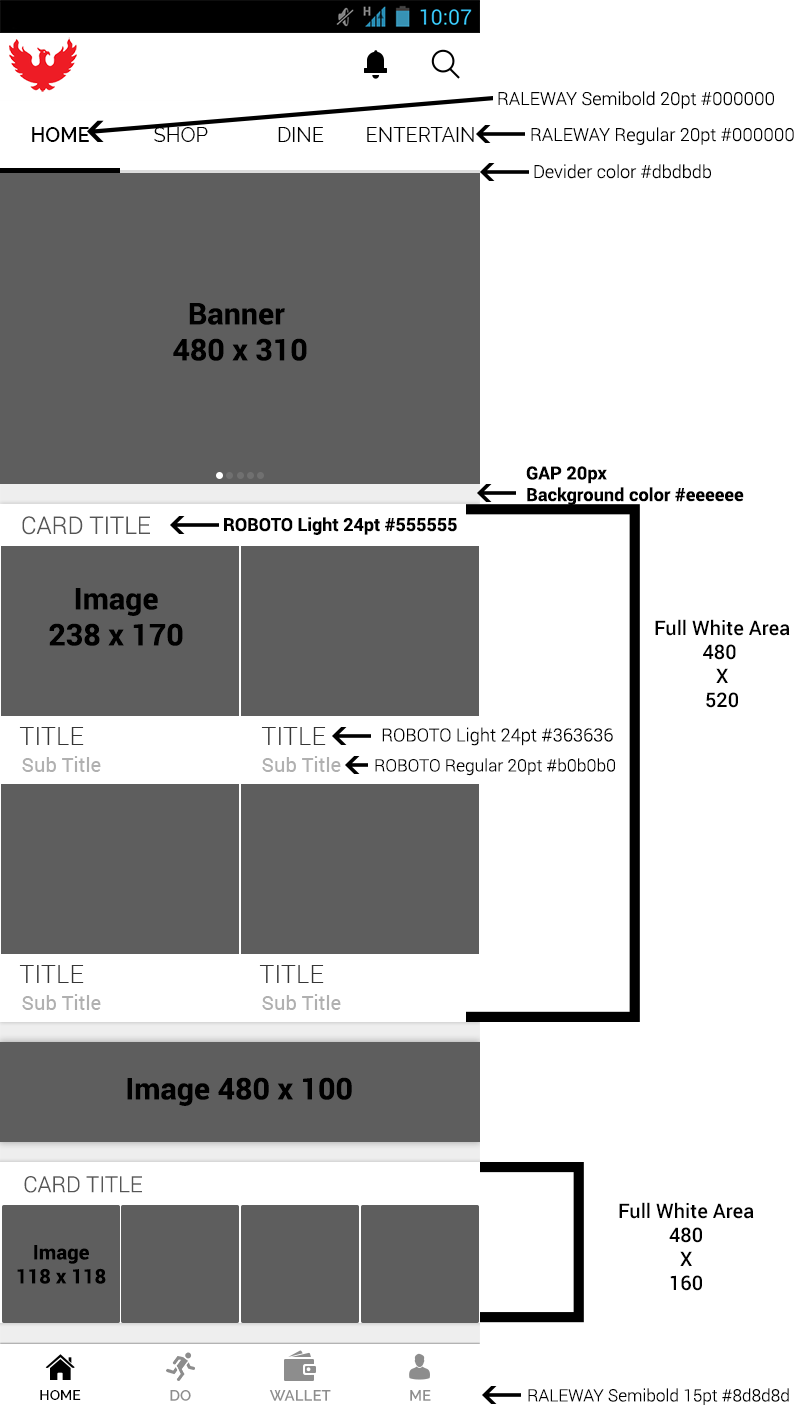
<style>
.page{position:relative;width:800px;height:1408px;background:#ffffff}
.page>*{position:absolute;margin:0}
.t1{font:18px "Roboto-Light";color:#000000}
.t2{font:20px "Raleway-SemiBold";color:#000000}
.t3{font:20px "Raleway";color:#000000}
.t4{font:30px "Roboto-Bold";color:#000000}
.t5{font:18px "Roboto-Bold";color:#000000}
.t6{font:24.2px "Roboto-Light";color:#555555}
.t7{font:20px "Roboto-Medium";color:#000000}
.t8{font:25.3px "Roboto-Light";color:#363636}
.t9{font:20px "Roboto-Regular";color:#b0b0b0}
.t10{font:17px "Roboto-Light";color:#000000}
.t11{font:22.2px "Roboto-Light";color:#555555}
.t12{font:20px "Roboto-Bold";color:#000000}
.t13{font:14px "Raleway-SemiBold";color:#000000}
.t14{font:15px "Raleway-SemiBold";color:#8d8d8d}
</style>
<div class="page">
<p class="t1" style="left:498px;top:91px;width:276px;height:18px">RALEWAY Semibold 20pt #000000</p>
<p class="t2" style="left:32px;top:127px;width:57px;height:15px">HOME</p>
<p class="t3" style="left:154px;top:127px;width:54px;height:15px">SHOP</p>
<p class="t3" style="left:278px;top:127px;width:46px;height:15px">DINE</p>
<p class="t3" style="left:367px;top:127px;width:107px;height:15px">ENTERTAIN</p>
<p class="t1" style="left:531px;top:127px;width:263px;height:18px">RALEWAY Regular 20pt #000000</p>
<p class="t1" style="left:534px;top:164px;width:177px;height:15px">Devider color #dbdbdb</p>
<p class="t4" style="left:173px;top:303px;width:134px;height:58px;text-align:center">Banner <br>480 x 310</p>
<p class="t5" style="left:526px;top:466px;width:218px;height:39px">GAP 20px<br>Background color #eeeeee</p>
<p class="t6" style="left:22px;top:516px;width:128px;height:19px">CARD TITLE</p>
<p class="t5" style="left:224px;top:517px;width:233px;height:18px">ROBOTO Light 24pt #555555</p>
<p class="t4" style="left:49px;top:588px;width:134px;height:58px;text-align:center">Image<br>238 x 170</p>
<p class="t7" style="left:655px;top:619px;width:135px;height:89px;text-align:center">Full White Area<br>480 <br>X<br>520</p>
<p class="t8" style="left:19px;top:727px;width:65px;height:18px">TITLE</p>
<p class="t8" style="left:261px;top:727px;width:65px;height:18px">TITLE</p>
<p class="t1" style="left:382px;top:727px;width:231px;height:19px">ROBOTO Light 24pt #363636</p>
<p class="t9" style="left:22px;top:756px;width:79px;height:16px">Sub Title</p>
<p class="t9" style="left:262px;top:756px;width:79px;height:16px">Sub Title</p>
<p class="t10" style="left:375px;top:758px;width:240px;height:18px">ROBOTO Regular 20pt #b0b0b0</p>
<p class="t8" style="left:19px;top:965px;width:65px;height:18px">TITLE</p>
<p class="t8" style="left:259px;top:965px;width:65px;height:18px">TITLE</p>
<p class="t9" style="left:22px;top:994px;width:79px;height:16px">Sub Title</p>
<p class="t9" style="left:262px;top:994px;width:79px;height:16px">Sub Title</p>
<p class="t4" style="left:127px;top:1077px;width:225px;height:29px">Image 480 x 100</p>
<p class="t11" style="left:24px;top:1176px;width:118px;height:17px">CARD TITLE</p>
<p class="t7" style="left:619px;top:1202px;width:135px;height:89px;text-align:center">Full White Area<br>480<br>X<br>160</p>
<p class="t12" style="left:17px;top:1245px;width:89px;height:39px;text-align:center">Image<br>118 x 118</p>
<p class="t13" style="left:40px;top:1390px;width:41px;height:10px">HOME</p>
<p class="t14" style="left:170px;top:1390px;width:21px;height:11px">DO</p>
<p class="t14" style="left:269px;top:1390px;width:62px;height:11px">WALLET</p>
<p class="t14" style="left:410px;top:1390px;width:21px;height:11px">ME</p>
<p class="t10" style="left:528px;top:1388px;width:261px;height:17px">RALEWAY Semibold 15pt #8d8d8d</p>
</div>
